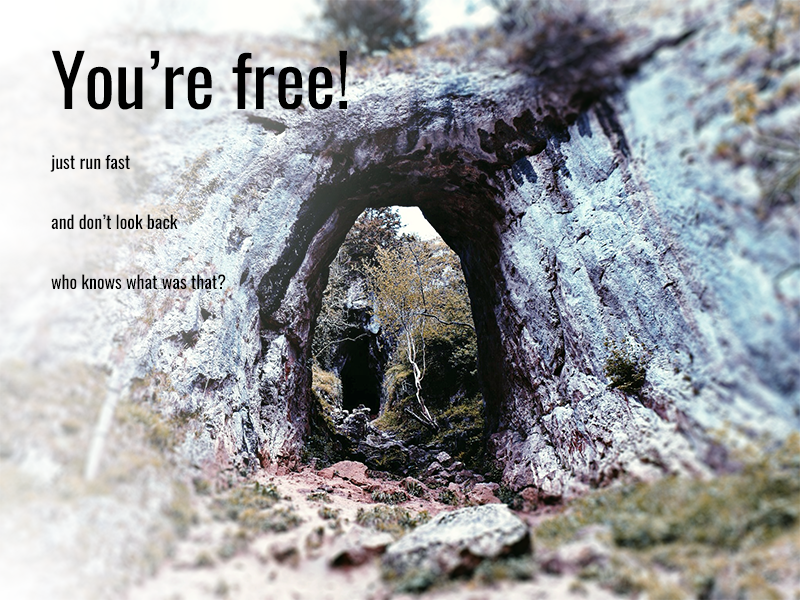
<style>
.page{position:relative;width:800px;height:600px}
.page>*{position:absolute;margin:0}
.t1{font:18px/60px "Oswald-Regular";color:#000000}
.t2{font:72px/60px "Oswald-Regular";color:#000000}
</style>
<div class="page">
<p class="t1" style="left:50px;top:50px;width:297px;height:240px"><span class="t2">You’re free!<br></span>just run fast<br>and don’t look back<br>who knows what was that?</p>
</div>
